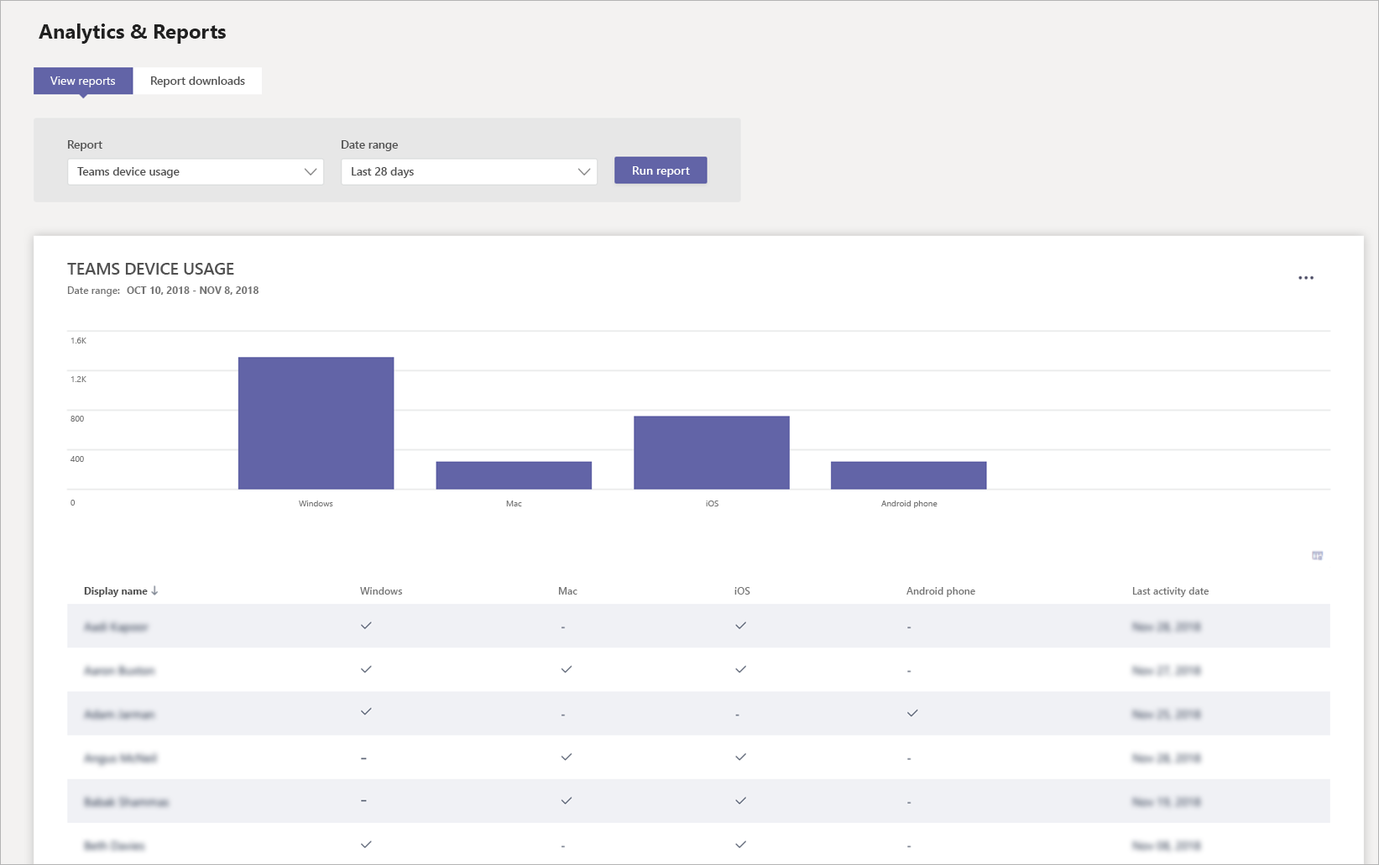
<style>
.page{position:relative;width:1379px;height:865px;background:#ffffff}
.page>*{position:absolute;margin:0}
.t1{font:20.1px "SegoeUI-Bold";color:#202020}
.t2{font:11.8px "SegoeUI";color:#ffffff}
.t3{font:11.4px "SegoeUI-Semibold";color:#505050}
.t4{font:11.8px "SegoeUI-Semibold";color:#ffffff}
.t5{font:16.4px "SegoeUI-Semibold";color:#505050}
.t6{font:10.1px "SegoeUI-Semibold";color:#737373}
.t7{font:10.1px "SegoeUI-Bold";color:#737373}
.t8{font:8.4px "SegoeUI";color:#737373}
.t9{font:10.1px "SegoeUI-Bold";color:#505050}
</style>
<div class="page">
<p class="t1" style="left:39px;top:24px;width:187px;height:20px">Analytics &amp; Reports</p>
<p class="t2" style="left:50px;top:76px;width:65px;height:11px">View reports</p>
<p class="t3" style="left:151px;top:76px;width:94px;height:11px">Report downloads</p>
<p class="t3" style="left:68px;top:140px;width:34px;height:11px">Report</p>
<p class="t3" style="left:342px;top:140px;width:57px;height:11px">Date range</p>
<p class="t3" style="left:77px;top:167px;width:103px;height:11px">Teams device usage</p>
<p class="t3" style="left:352px;top:167px;width:62px;height:11px">Last 28 days</p>
<p class="t4" style="left:633px;top:166px;width:57px;height:11px">Run report</p>
<p class="t5" style="left:67px;top:263px;width:167px;height:11px">TEAMS DEVICE USAGE</p>
<p class="t6" style="left:67px;top:286px;width:53px;height:10px">Date range:</p>
<p class="t7" style="left:127px;top:286px;width:132px;height:9px">OCT 10, 2018 - NOV 8, 2018</p>
<p class="t8" style="left:71px;top:337px;width:15px;height:6px">1.6K</p>
<p class="t8" style="left:71px;top:376px;width:15px;height:6px">1.2K</p>
<p class="t8" style="left:71px;top:416px;width:13px;height:5px">800</p>
<p class="t8" style="left:71px;top:456px;width:13px;height:6px">400</p>
<p class="t8" style="left:71px;top:499px;width:5px;height:6px">0</p>
<p class="t8" style="left:299px;top:500px;width:34px;height:6px">Windows</p>
<p class="t8" style="left:506px;top:500px;width:16px;height:6px">Mac</p>
<p class="t8" style="left:706px;top:500px;width:13px;height:6px">iOS</p>
<p class="t8" style="left:881px;top:500px;width:57px;height:8px">Android phone</p>
<p class="t9" style="left:84px;top:587px;width:64px;height:10px">Display name</p>
<p class="t6" style="left:360px;top:587px;width:43px;height:7px">Windows</p>
<p class="t6" style="left:558px;top:587px;width:20px;height:7px">Mac</p>
<p class="t6" style="left:734px;top:587px;width:16px;height:7px">iOS</p>
<p class="t6" style="left:907px;top:587px;width:68px;height:10px">Android phone</p>
<p class="t6" style="left:1132px;top:587px;width:78px;height:10px">Last activity date</p>
</div>
